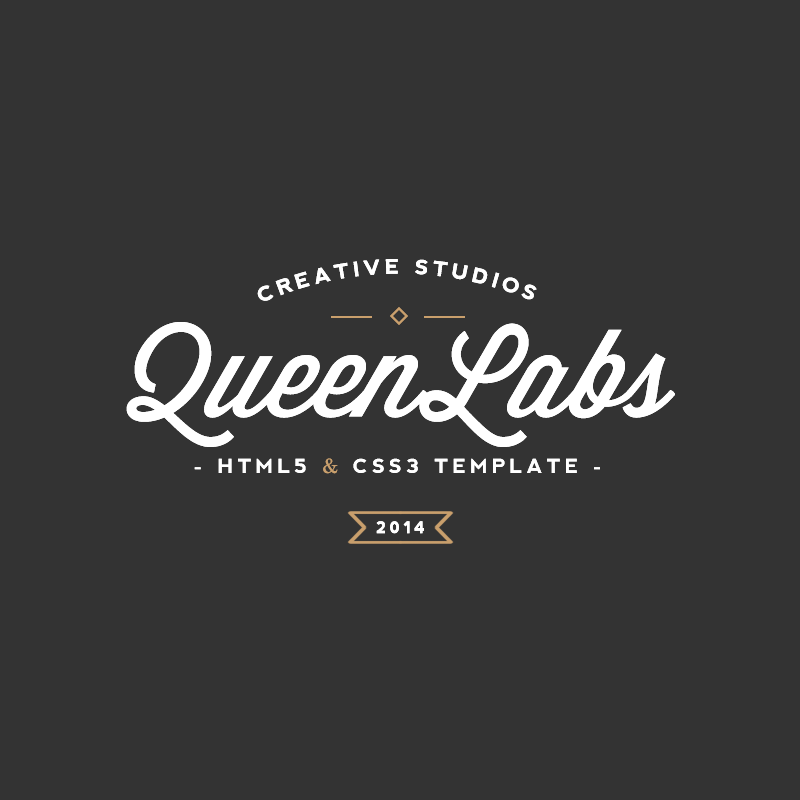
<style>
.page{position:relative;width:800px;height:800px;background:#333333}
.page>*{position:absolute;margin:0}
.t1{font:19.9px "nevis-Bold";letter-spacing:0.2em;color:#ffffff;text-transform:uppercase}
.t2{font:120px "Wisdom-Script";color:#ffffff}
.t3{font:19.6px "nevis-Bold";letter-spacing:0.2em;color:#ffffff;text-transform:uppercase}
.t4{font:19.6px "Century";letter-spacing:0.2em;color:#c99f6c;text-transform:uppercase}
.t5{font:16px "nevis-Bold";letter-spacing:0.2em;color:#ffffff;text-transform:uppercase}
</style>
<div class="page">
<p class="t1" style="left:257px;top:259px;width:280px;height:42px;text-align:center">Creative studios</p>
<p class="t2" style="left:126px;top:322px;width:549px;height:125px">QueenLabs</p>
<p class="t3" style="left:194px;top:458px;width:406px;height:16px">- HTML5 <span class="t4">&amp;</span> CSS3 TEMPLATE -</p>
<p class="t5" style="left:376px;top:521px;width:48px;height:13px">2014</p>
</div>
